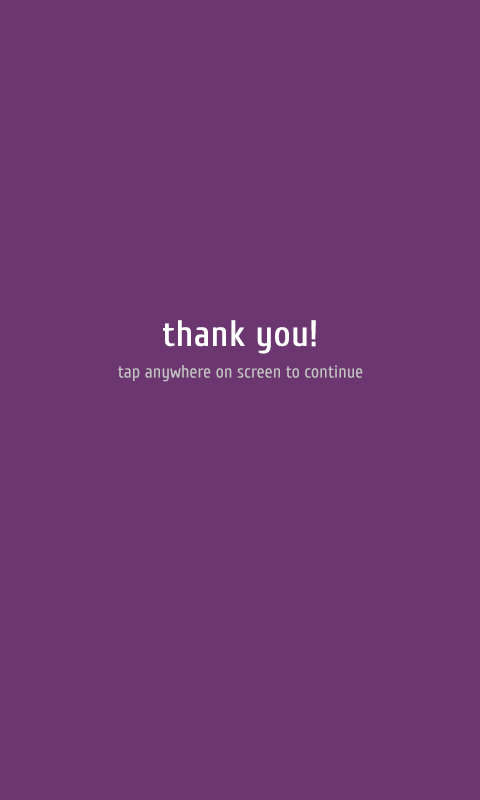
<style>
.page{position:relative;width:480px;height:800px;background:#6c3670}
.page>*{position:absolute;margin:0}
.t1{font:36px "Cuprum-Regular";color:#ffffff;font-weight:bold}
.t2{font:18px "Cuprum-Regular";color:#c4c4c4}
</style>
<div class="page">
<p class="t1" style="left:163px;top:320px;width:153px;height:34px">thank you!</p>
<p class="t2" style="left:118px;top:365px;width:245px;height:17px">tap anywhere on screen to continue</p>
</div>
